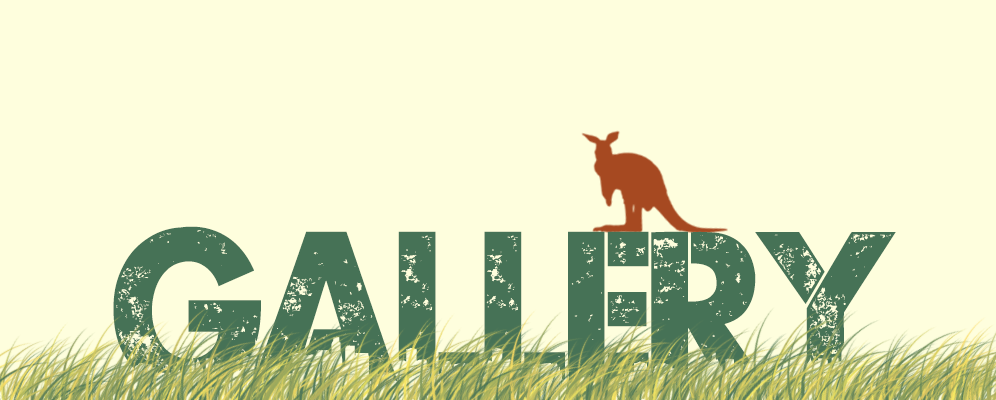
<style>
.page{position:relative;width:996px;height:400px;background:#fefedd}
.page>*{position:absolute;margin:0}
.t1{font:200px "UrbanJungleDEMO";color:#467256}
</style>
<div class="page">
<p class="t1" style="left:113px;top:226px;width:783px;height:161px">Gallery</p>
</div>
